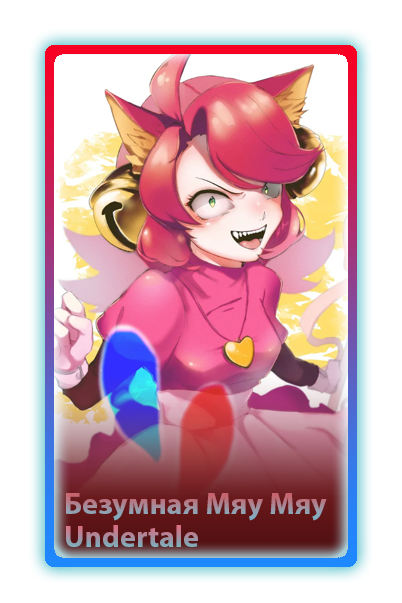
<style>
.page{position:relative;width:402px;height:603px;background:#ffffff}
.page>*{position:absolute;margin:0}
.t1{font:30px "MyriadPro-Bold"}
</style>
<div class="page">
<p class="t1" style="left:66px;top:493px;width:261px;height:28px">Безумная Мяу Мяу</p>
<p class="t1" style="left:66px;top:525px;width:132px;height:22px">Undertale</p>
</div>
